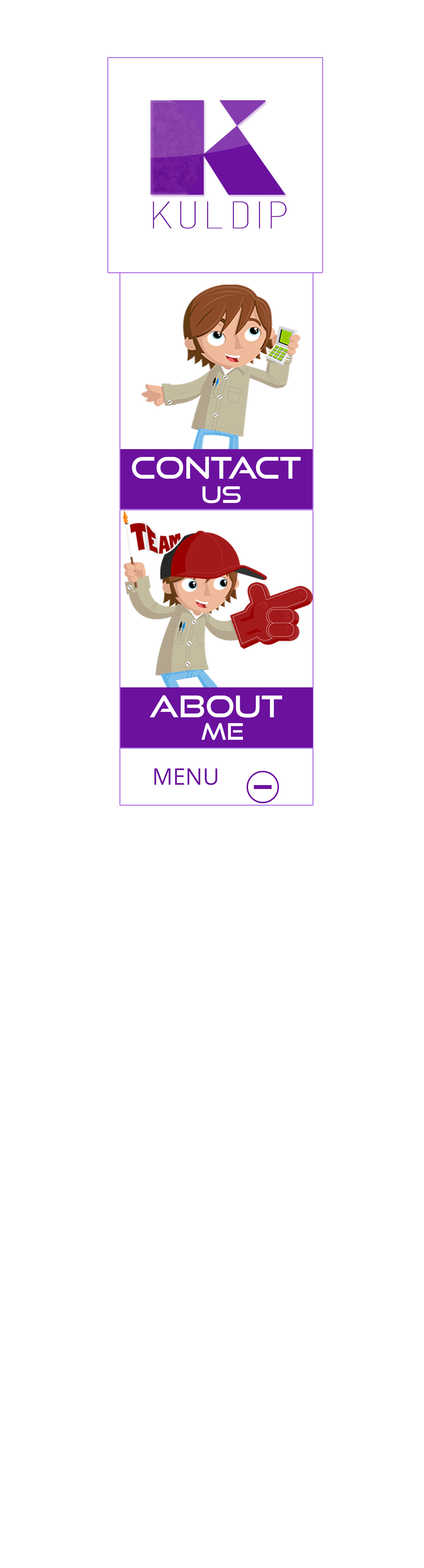
<style>
.page{position:relative;width:424px;height:1568px;background:#ffffff}
.page>*{position:absolute;margin:0}
.t1{font:30px "GoodTimesRg-Regular";color:#ffffff}
.t2{font:22.8px "GoodTimesRg-Regular";color:#ffffff}
.t3{font:22.8px "OpenSans";color:#6b119e}
</style>
<div class="page">
<p class="t1" style="left:132px;top:457px;width:169px;height:22px">Contact</p>
<p class="t2" style="left:203px;top:486px;width:38px;height:17px">US</p>
<p class="t1" style="left:150px;top:695px;width:132px;height:23px">About</p>
<p class="t2" style="left:202px;top:723px;width:41px;height:17px">me</p>
<p class="t3" style="left:154px;top:768px;width:64px;height:17px">MENU</p>
</div>
